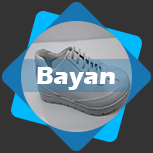
<style>
.page{position:relative;width:153px;height:153px;background:#333333}
.page>*{position:absolute;margin:0}
.t1{font:25px "ErasITC-Bold";color:#ffffff}
</style>
<div class="page">
<p class="t1" style="left:37px;top:67px;width:78px;height:23px">Bayan</p>
</div>
